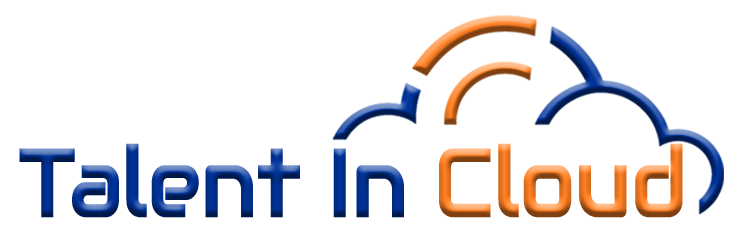
<style>
.page{position:relative;width:740px;height:238px;background:#ffffff}
.page>*{position:absolute;margin:0}
.t1{font:96.3px "Audiowide-Regular";font-weight:bold;scale:0.8 1}
</style>
<div class="page">
<p class="t1" style="left:19px;top:143px;width:664px;height:75px">Talent In Cloud</p>
</div>
